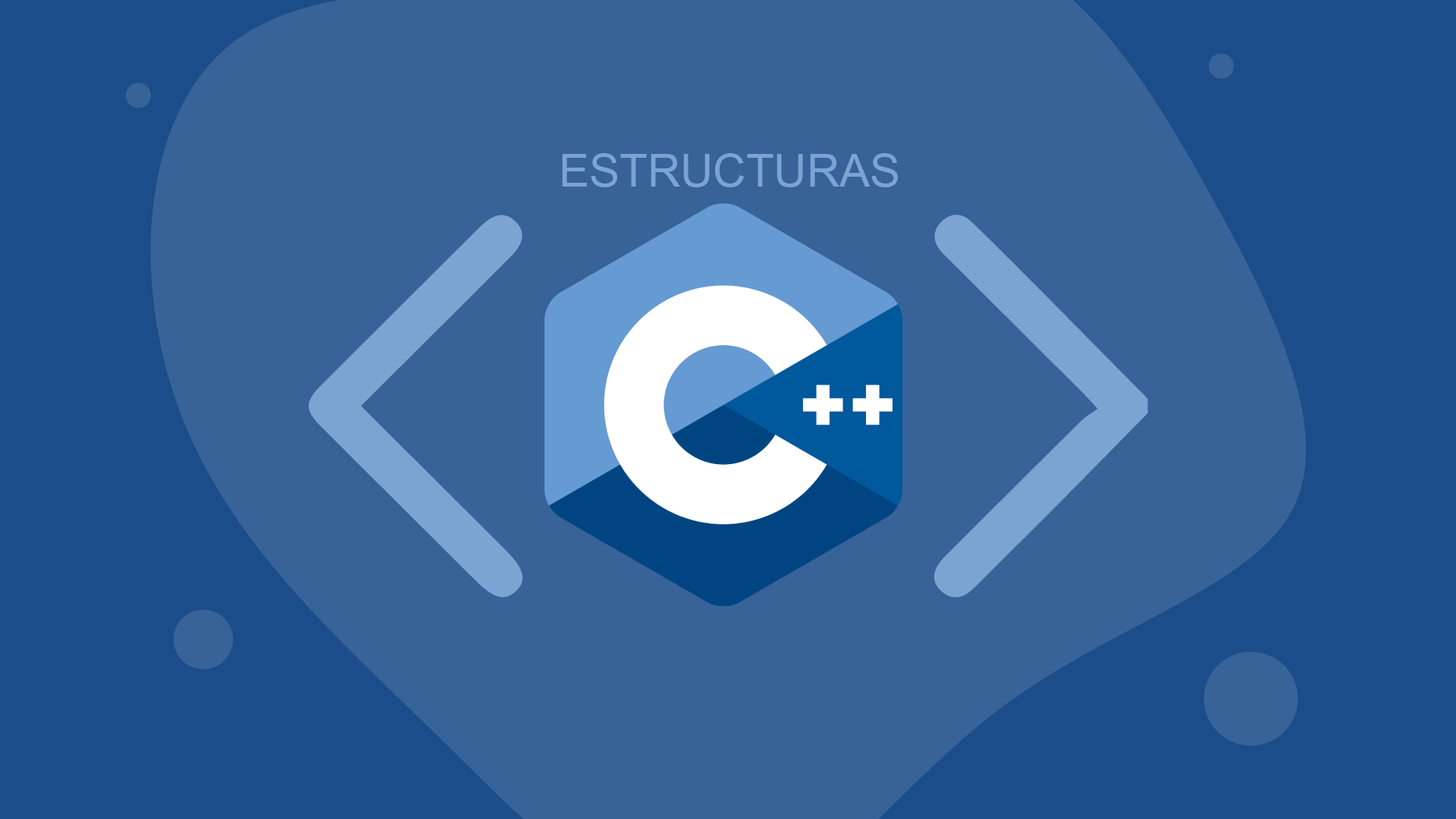
<style>
.page{position:relative;width:1456px;height:819px;background:#376399}
.page>*{position:absolute;margin:0}
.t1{font:45.5px "ArialMT";color:#7ba4d3}
</style>
<div class="page">
<p class="t1" style="left:562px;top:153px;width:336px;height:34px">ESTRUCTURAS</p>
</div>
